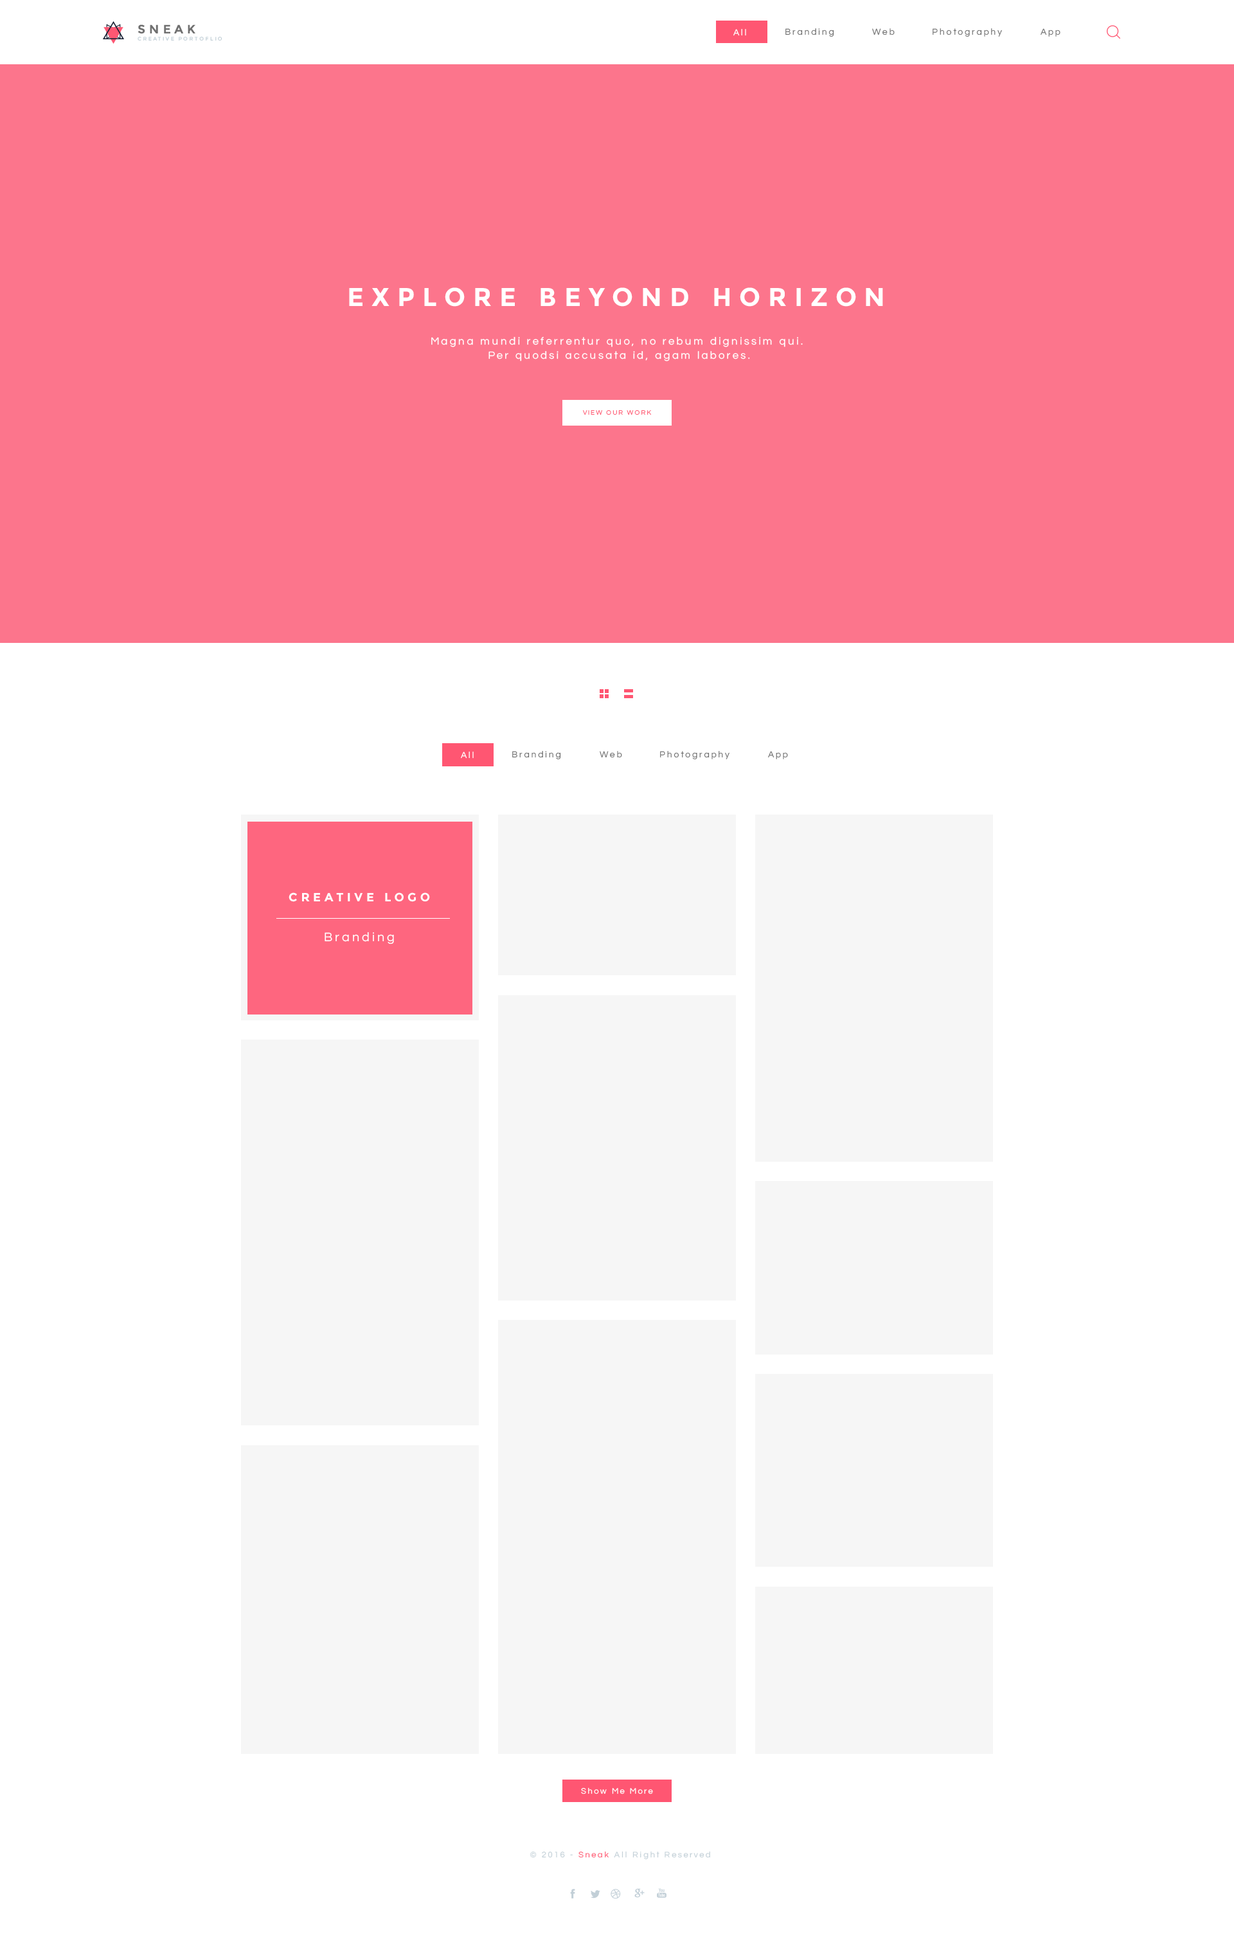
<style>
.page{position:relative;width:1234px;height:1948px;background:#ffffff}
.page>*{position:absolute;margin:0}
.t1{font:12.2px "Montserrat-Bold";letter-spacing:0.3em;color:#707070}
.t2{font:9px "Questrial-Regular";letter-spacing:0.2em;color:#ffffff}
.t3{font:9px "Questrial-Regular";letter-spacing:0.2em;color:#707070}
.t4{font:5.1px "Montserrat-Regular";letter-spacing:0.3em;color:#c3d0d8}
.t5{font:25.7px "Montserrat-Bold";letter-spacing:0.3em;color:#ffffff}
.t6{font:10.8px/14.4px "Questrial-Regular";letter-spacing:0.2em;color:#ffffff}
.t7{font:6.6px "Questrial-Regular";letter-spacing:0.2em;color:#ff5773}
.t8{font:11.9px "Montserrat-Bold";letter-spacing:0.3em;color:#ffffff}
.t9{font:12.9px "Questrial-Regular";letter-spacing:0.2em;color:#ffffff}
.t10{font:8.4px "Questrial-Regular";letter-spacing:0.2em;color:#ffffff}
.t11{font:8.4px "Questrial-Regular";letter-spacing:0.2em;color:#c3d0d8}
.t12{font:8.4px "Questrial-Regular";letter-spacing:0.2em;color:#ff5773}
</style>
<div class="page">
<p class="t1" style="left:138px;top:24px;width:57px;height:10px">SNEAK</p>
<p class="t2" style="left:734px;top:29px;width:12px;height:7px">All</p>
<p class="t3" style="left:786px;top:28px;width:48px;height:9px">Branding</p>
<p class="t3" style="left:872px;top:28px;width:23px;height:7px">Web</p>
<p class="t3" style="left:933px;top:28px;width:69px;height:9px">Photography</p>
<p class="t3" style="left:1041px;top:28px;width:20px;height:9px">App</p>
<p class="t4" style="left:138px;top:37px;width:84px;height:4px">CREATIVE PORTOFLIO</p>
<p class="t5" style="left:349px;top:287px;width:534px;height:20px">EXPLORE BEYOND HORIZON</p>
<p class="t6" style="left:431px;top:337px;width:372px;height:24px;text-align:center">Magna mundi referrentur quo, no rebum dignissim qui. <br>Per quodsi accusata id, agam labores.</p>
<p class="t7" style="left:583px;top:410px;width:68px;height:5px">VIEW OUR WORK</p>
<p class="t2" style="left:461px;top:752px;width:13px;height:7px">All</p>
<p class="t3" style="left:512px;top:751px;width:49px;height:9px">Branding</p>
<p class="t3" style="left:600px;top:751px;width:22px;height:7px">Web</p>
<p class="t3" style="left:660px;top:751px;width:70px;height:9px">Photography</p>
<p class="t3" style="left:768px;top:751px;width:20px;height:8px">App</p>
<p class="t8" style="left:289px;top:892px;width:141px;height:10px">CREATIVE LOGO</p>
<p class="t9" style="left:325px;top:932px;width:69px;height:12px">Branding</p>
<p class="t10" style="left:581px;top:1787px;width:72px;height:7px">Show Me More</p>
<p class="t11" style="left:530px;top:1851px;width:180px;height:8px">© 2016 - <span class="t12">Sneak</span> All Right Reserved</p>
</div>
